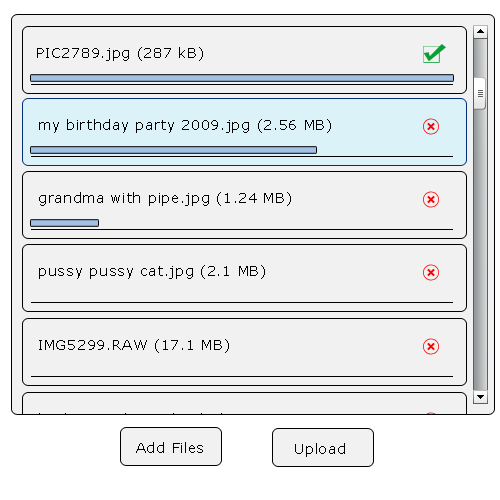
<style>
.page{position:relative;width:500px;height:500px;background:#f1f1f1}
.page>*{position:absolute;margin:0}
.t1{font:14px "Verdana";letter-spacing:0.05em;color:#000000}
</style>
<div class="page">
<p class="t1" style="left:37px;top:47px;width:166px;height:14px">PIC2789.jpg (287 kB)</p>
<p class="t1" style="left:39px;top:119px;width:292px;height:14px">my birthday party 2009.jpg (2.56 MB)</p>
<p class="t1" style="left:39px;top:192px;width:252px;height:14px">grandma with pipe.jpg (1.24 MB)</p>
<p class="t1" style="left:39px;top:265px;width:226px;height:14px">pussy pussy cat.jpg (2.1 MB)</p>
<p class="t1" style="left:39px;top:339px;width:190px;height:14px">IMG5299.RAW (17.1 MB)</p>
<p class="t1" style="left:136px;top:442px;width:67px;height:11px">Add Files</p>
<p class="t1" style="left:295px;top:443px;width:50px;height:14px">Upload</p>
</div>
